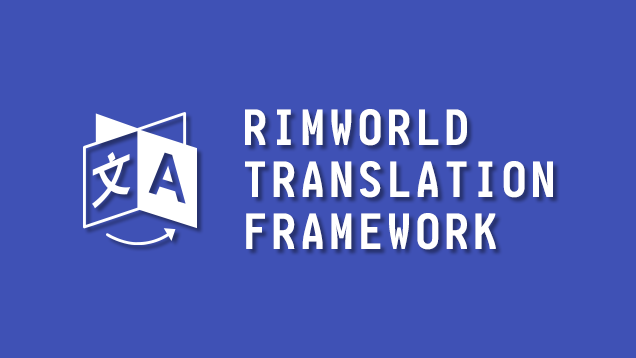
<style>
.page{position:relative;width:636px;height:358px;background:#3f51b5}
.page>*{position:absolute;margin:0}
.t1{font:48px/52px "Inziu-Iosevka-SC-Bold";letter-spacing:0.1em;color:#ffffff}
</style>
<div class="page">
<p class="t1" style="left:245px;top:109px;width:308px;height:141px">RIMWORLD<br>TRANSLATION<br>FRAMEWORK</p>
</div>
